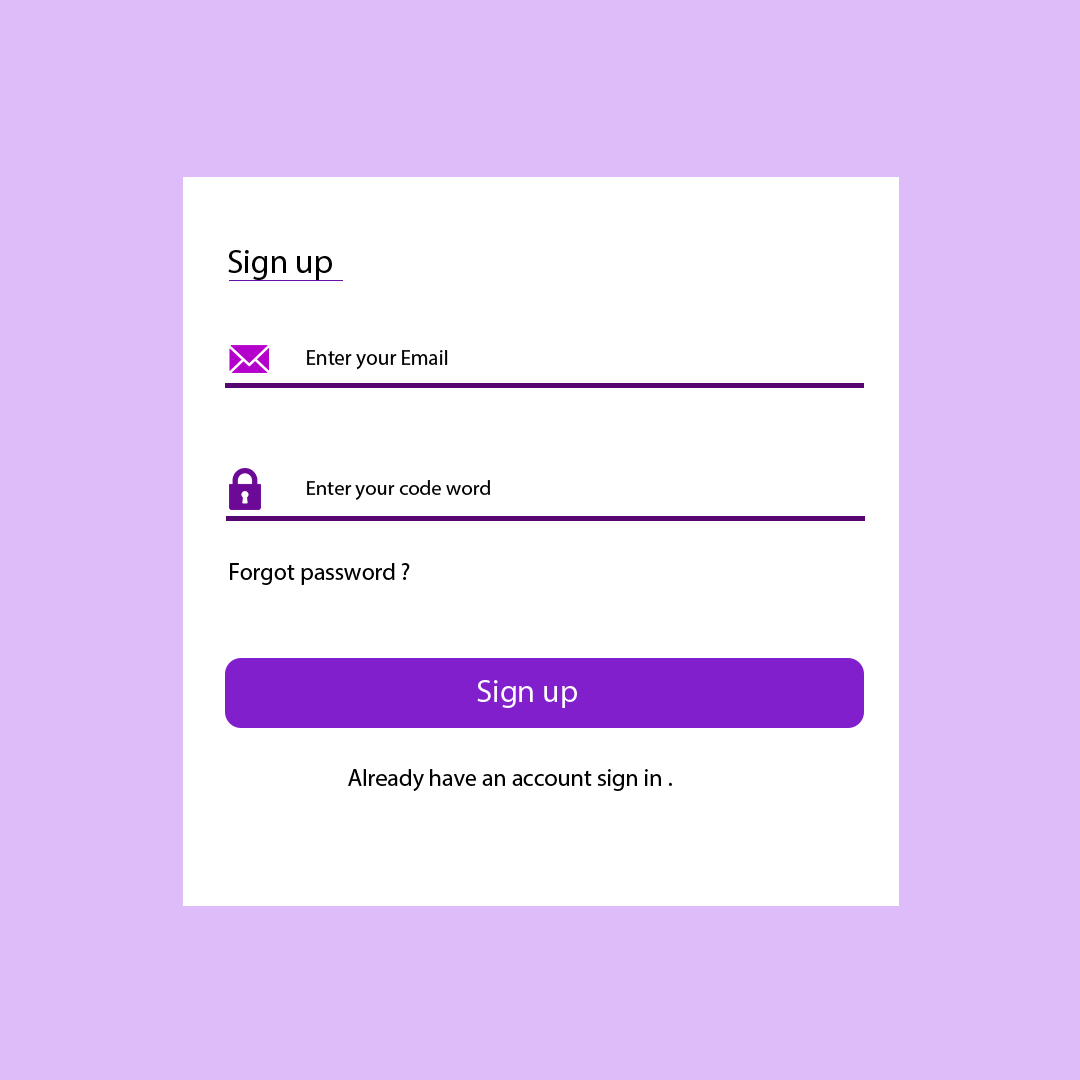
<style>
.page{position:relative;width:1080px;height:1080px;background:#debbf9}
.page>*{position:absolute;margin:0}
.t1{font:33.8px "MyriadPro-Regular";color:#000000}
.t2{font:21.2px "MyriadPro-Regular";color:#000000}
.t3{font:20.8px "MyriadPro-Regular";color:#000000}
.t4{font:24px "MyriadPro-Regular";color:#000000}
.t5{font:32.2px "MyriadPro-Regular";color:#fdfaff}
</style>
<div class="page">
<p class="t1" style="left:228px;top:250px;width:104px;height:30px">Sign up</p>
<p class="t2" style="left:307px;top:350px;width:141px;height:20px">Enter your Email</p>
<p class="t3" style="left:307px;top:480px;width:183px;height:20px">Enter your code word</p>
<p class="t4" style="left:230px;top:563px;width:180px;height:22px">Forgot password ?</p>
<p class="t5" style="left:477px;top:680px;width:100px;height:28px">Sign up</p>
<p class="t4" style="left:348px;top:769px;width:324px;height:22px">Already have an account sign in .</p>
</div>
